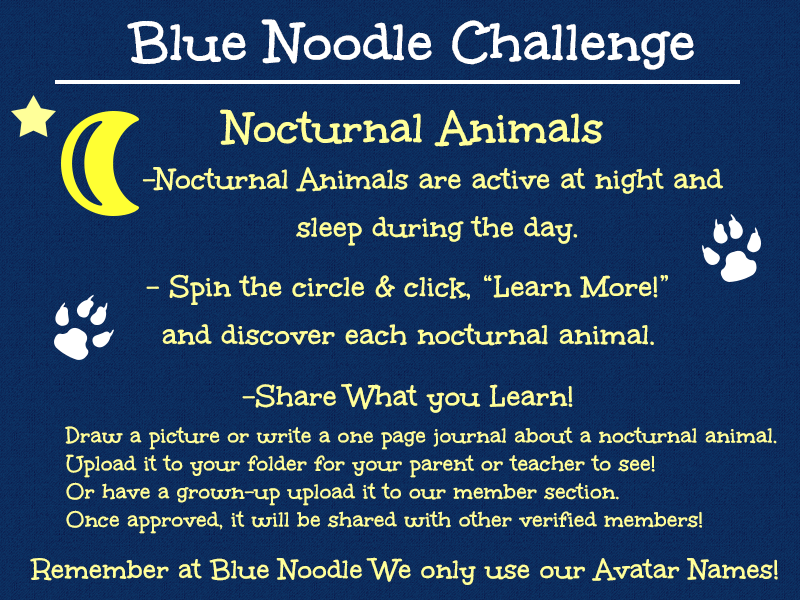
<style>
.page{position:relative;width:800px;height:600px}
.page>*{position:absolute;margin:0}
.t1{font:60px "Unkempt-Bold";color:#ffffff}
.t2{font:48px "Unkempt-Bold";color:#ffff99}
.t3{font:32px/48px "Unkempt-Bold";color:#ffff99}
.t4{font:32px "Unkempt-Bold";color:#ffff99}
.t5{font:24px/28px "Unkempt-Bold";color:#ffff99}
.t6{font:30px "Unkempt-Bold";color:#ffff99}
</style>
<div class="page">
<p class="t1" style="left:127px;top:19px;width:567px;height:51px">Blue Noodle Challenge</p>
<p class="t2" style="left:220px;top:109px;width:383px;height:38px">Nocturnal Animals</p>
<p class="t3" style="left:142px;top:167px;width:581px;height:79px;text-align:center">-Nocturnal Animals are active at night and <br>sleep during the day.</p>
<p class="t3" style="left:146px;top:274px;width:522px;height:72px;text-align:center">- Spin the circle &amp; click, “Learn More!” <br>and discover each nocturnal animal.</p>
<p class="t4" style="left:242px;top:383px;width:331px;height:30px">-Share What you Learn!</p>
<p class="t5" style="left:65px;top:426px;width:712px;height:108px">Draw a picture or write a one page journal about a nocturnal animal. <br>Upload it to your folder for your parent or teacher to see! <br>Or have a grown-up upload it to our member section. <br>Once approved, it will be shared with other verified members!</p>
<p class="t6" style="left:30px;top:557px;width:748px;height:28px">Remember at Blue Noodle We only use our Avatar Names!</p>
</div>
